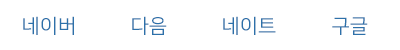
<style>
.page{position:relative;width:400px;height:50px;background:#ffffff}
.page>*{position:absolute;margin:0}
.t1{font:20px "NanumSquareR";color:#2d71aa}
</style>
<div class="page">
<p class="t1" style="left:23px;top:16px;width:51px;height:19px">네이버</p>
<p class="t1" style="left:132px;top:16px;width:35px;height:19px">다음</p>
<p class="t1" style="left:223px;top:16px;width:53px;height:19px">네이트</p>
<p class="t1" style="left:332px;top:17px;width:36px;height:18px">구글</p>
</div>
